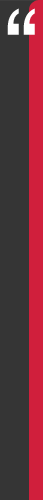
<style>
.page{position:relative;width:43px;height:500px;background:#353535}
.page>*{position:absolute;margin:0}
.t1{font:84.4px "GenevaCY";color:#ffffff}
</style>
<div class="page">
<p class="t1" style="left:7px;top:8px;width:28px;height:27px">“</p>
</div>
